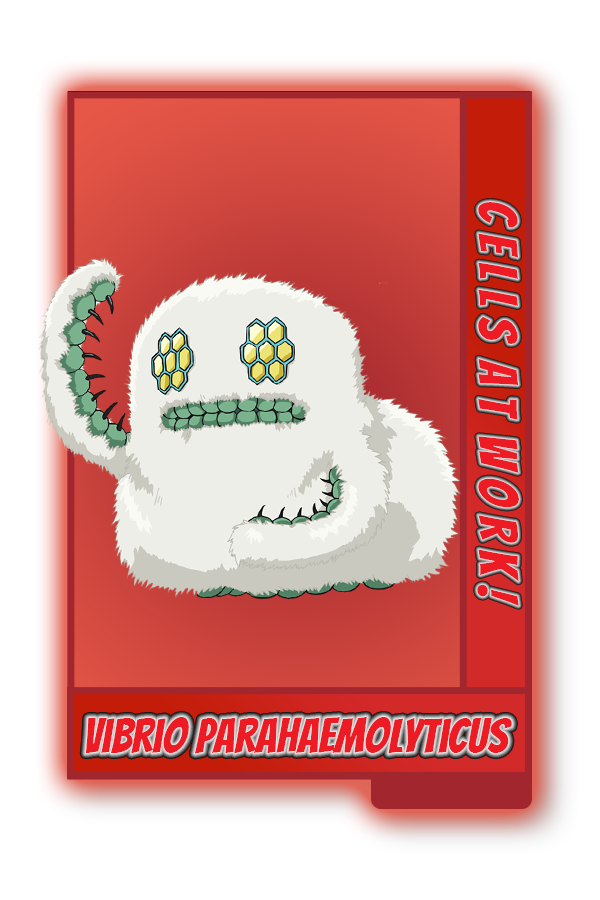
<style>
.page{position:relative;width:600px;height:900px;background:#ffffff}
.page>*{position:absolute;margin:0}
.t1{font:54px "Bangers-Regular";color:#ed1c24}
.t2{font:47.9px "Bangers-Regular";color:#ed1c24}
</style>
<div class="page">
<p class="t1" style="left:477px;top:202px;width:42px;height:404px;rotate:90deg">C e l l S  A t  W o r k !</p>
<p class="t2" style="left:85px;top:717px;width:427px;height:37px">Vibrio Parahaemolyticus</p>
</div>
